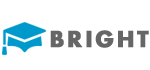
<style>
.page{position:relative;width:150px;height:70px;background:#ffffff}
.page>*{position:absolute;margin:0}
.t1{font:21.5px "Futura-Bold";letter-spacing:0.095em;color:#666666;text-transform:uppercase;font-weight:bold}
</style>
<div class="page">
<p class="t1" style="left:50px;top:30px;width:99px;height:18px">Bright</p>
</div>
